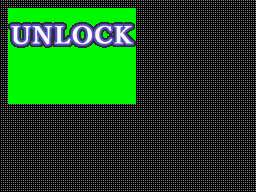
<style>
.page{position:relative;width:256px;height:192px;background:#000000}
.page>*{position:absolute;margin:0}
.t1{font:24px "YuMincho-Demibold";letter-spacing:0.05em;color:#f8f8f8;font-weight:bold}
</style>
<div class="page">
<p class="t1" style="left:11px;top:25px;width:122px;height:20px">UNLOCK</p>
</div>
